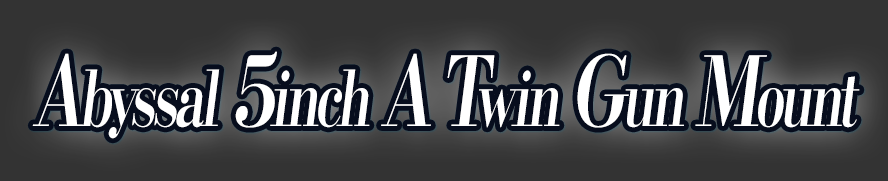
<style>
.page{position:relative;width:888px;height:181px;background:#333333}
.page>*{position:absolute;margin:0}
.t1{font:76.8px "KochoStd-Heavy";letter-spacing:-0.08em;color:#ffffff;font-style:italic;scale:0.72 1}
.t2{font:96px "KochoStd-Heavy";letter-spacing:-0.08em;color:#ffffff;font-style:italic;scale:0.72 1}
</style>
<div class="page">
<p class="t1" style="left:32px;top:51px;width:828px;height:88px"><span class="t2">A</span>byssal<span class="t2"> 5</span>inch <span class="t2">A T</span>win <span class="t2">G</span>un <span class="t2">M</span>ount</p>
</div>
